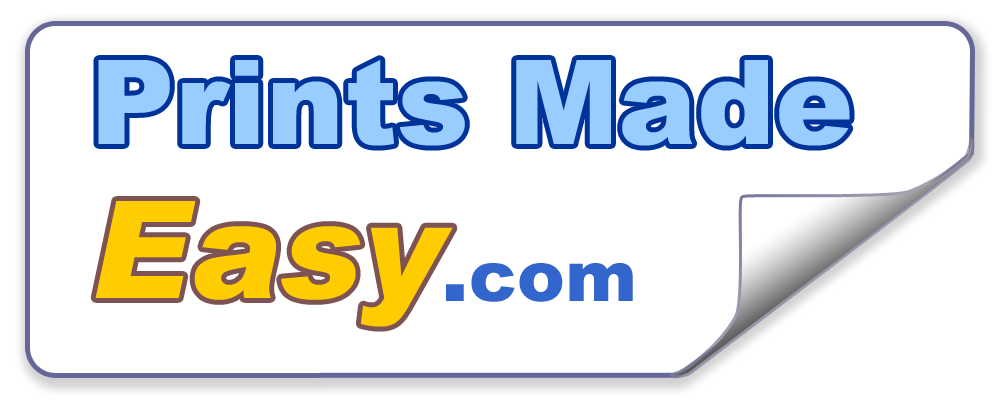
<style>
.page{position:relative;width:1000px;height:402px;background:#ffffff}
.page>*{position:absolute;margin:0}
.t1{font:117.4px "Arial-Black";color:#99ccff}
.t2{font:135.4px "Arial-BlackItalic";color:#ffcc00}
.t3{font:71.7px "Arial-Black";color:#3366cc}
.t4{font:83.6px "Arial-Black";color:#3366cc}
</style>
<div class="page">
<p class="t1" style="left:98px;top:60px;width:752px;height:86px">Prints Made</p>
<p class="t2" style="left:95px;top:201px;width:358px;height:126px">Easy</p>
<p class="t3" style="left:446px;top:263px;width:187px;height:39px"><span class="t4">.</span>com</p>
</div>
